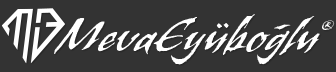
<style>
.page{position:relative;width:336px;height:72px;background:#333333}
.page>*{position:absolute;margin:0}
.t1{font:46.6px "BansheeStd";color:#ffffff}
.t2{font:32px "BansheeStd";color:#ffffff}
</style>
<div class="page">
<p class="t1" style="left:54px;top:14px;width:266px;height:51px">MevaEyüboglu</p>
<p class="t1" style="left:274px;top:24px;width:17px;height:6px;rotate:-13deg">-</p>
<p class="t2" style="left:322px;top:20px;width:13px;height:10px">®</p>
</div>
